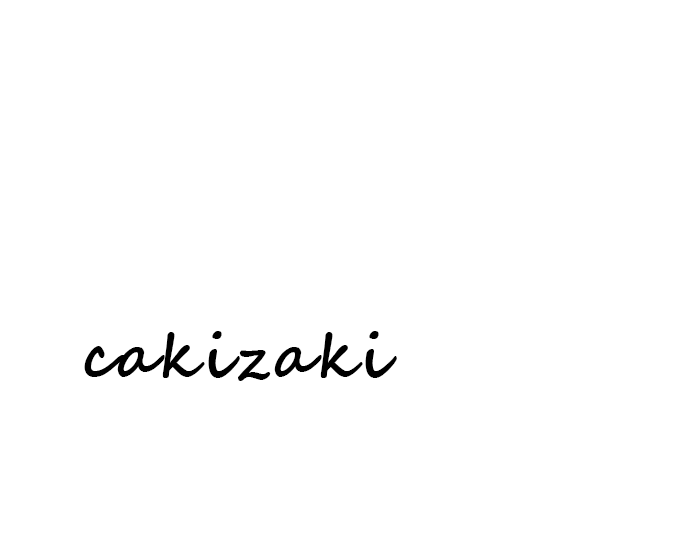
<style>
.page{position:relative;width:690px;height:540px;background:#ffffff}
.page>*{position:absolute;margin:0}
.t1{font:60px "SegoeScript-Bold";letter-spacing:0.05em;color:#000000}
</style>
<div class="page">
<p class="t1" style="left:84px;top:331px;width:313px;height:50px">cakizaki</p>
</div>
